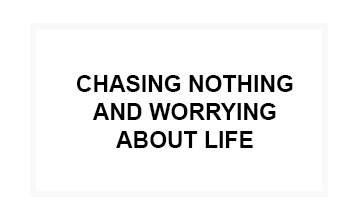
<style>
.page{position:relative;width:362px;height:224px;background:#ffffff}
.page>*{position:absolute;margin:0}
.t1{font:23px "Arial-BoldMT";color:#000000}
</style>
<div class="page">
<p class="t1" style="left:77px;top:75px;width:216px;height:73px;text-align:center">CHASING NOTHING<br>AND WORRYING<br>ABOUT LIFE</p>
</div>
